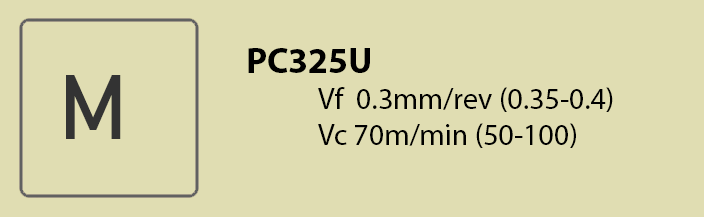
<style>
.page{position:relative;width:704px;height:217px;background:#e0ddb2}
.page>*{position:absolute;margin:0}
.t1{font:30px "MyriadPro-Regular";color:#000000}
.t2{font:36px "MyriadPro-Bold";color:#000000}
</style>
<div class="page">
<p class="t1" style="left:248px;top:48px;width:365px;height:100px"><span class="t2">PC325U</span><br>  Vf  0.3mm/rev (0.35-0.4)<br>  Vc 70m/min (50-100)</p>
</div>
